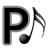
<style>
.page{position:relative;width:48px;height:48px;background:#ffffff}
.page>*{position:absolute;margin:0}
.t1{font:48.6px "Verdana";letter-spacing:-0.075em;color:#000000;font-weight:bold}
</style>
<div class="page">
<p class="t1" style="left:4px;top:7px;width:24px;height:37px">P</p>
</div>
